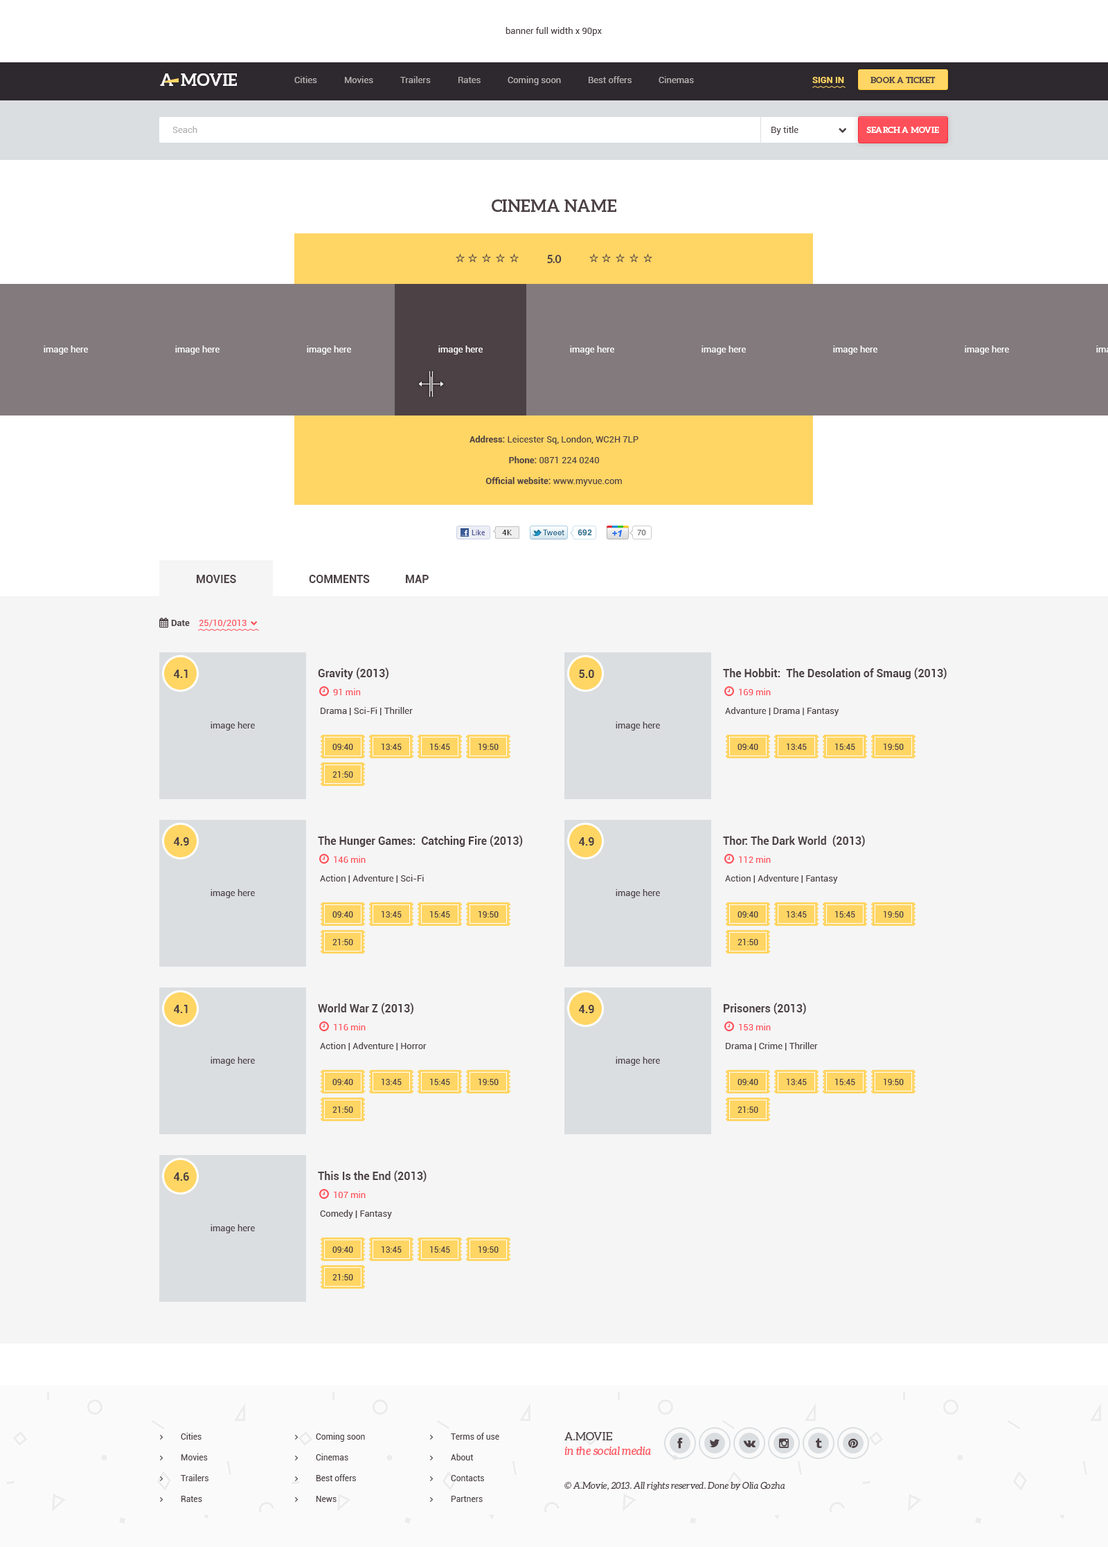
<style>
.page{position:relative;width:1108px;height:1547px;background:#f5f5f5}
.page>*{position:absolute;margin:0}
.t1{font:9px "Roboto-Regular";color:#4c4145}
.t2{font:16.6px "Aleo-Bold";color:#ffffff;text-transform:uppercase}
.t3{font:9px "Roboto-Regular";color:#b4b1b2}
.t4{font:9px "Roboto-Bold";color:#ffd564;text-transform:uppercase}
.t5{font:8.3px "Aleo-Bold";color:#4c4145;text-transform:uppercase}
.t6{font:8.3px "Aleo-Bold";color:#ffffff;text-transform:uppercase}
.t7{font:16.6px "Aleo-Bold";color:#4c4145;text-transform:uppercase}
.t8{font:11.1px "Aleo-Bold";color:#4c4145;text-transform:uppercase}
.t9{font:9px "Roboto-Regular";color:#ffffff}
.t10{font:9px "Roboto-Bold";color:#4c4145}
.t11{font:6.9px "LucidaGrande";letter-spacing:0.01em;color:#535998}
.t12{font:7.6px "LucidaGrande";color:#000000}
.t13{font:8px "HelveticaNeue-Medium";color:#186487}
.t14{font:8.3px "Helvetica-Bold";letter-spacing:0.015em;color:#2a7090}
.t15{font:9.7px "Arial-BoldItalicMT";color:#166aee}
.t16{font:7.6px "Helvetica";letter-spacing:0.015em;color:#666666}
.t17{font:11.1px "Roboto-Bold";color:#4c4145;text-transform:uppercase}
.t18{font:9px "Roboto-Regular";color:#fe505a}
.t19{font:11.1px "Roboto-Bold";color:#4c4145}
.t20{font:8.3px "Roboto-Regular";color:#4c4145}
.t21{font:11.1px/14.5px "Aleo-Italic";color:#fe505a}
.t22{font:11.1px/14.5px "Aleo-Regular";color:#4c4145;text-transform:uppercase}
.t23{font:9px "Aleo-Italic";color:#4c4145}
</style>
<div class="page">
<p class="t1" style="left:505px;top:27px;width:97px;height:9px">banner full width x 90px</p>
<p class="t2" style="left:160px;top:73px;width:13px;height:13px">A</p>
<p class="t2" style="left:181px;top:73px;width:56px;height:13px">movie</p>
<p class="t3" style="left:294px;top:76px;width:23px;height:7px">Cities</p>
<p class="t3" style="left:345px;top:76px;width:28px;height:7px">Movies</p>
<p class="t3" style="left:400px;top:76px;width:31px;height:7px">Trailers</p>
<p class="t3" style="left:458px;top:77px;width:22px;height:6px">Rates</p>
<p class="t3" style="left:507px;top:76px;width:54px;height:9px">Coming soon</p>
<p class="t3" style="left:588px;top:76px;width:43px;height:7px">Best offers</p>
<p class="t3" style="left:658px;top:76px;width:36px;height:7px">Cinemas</p>
<p class="t4" style="left:812px;top:77px;width:32px;height:6px">Sign in</p>
<p class="t5" style="left:870px;top:77px;width:65px;height:6px">Book a ticket</p>
<p class="t3" style="left:172px;top:126px;width:25px;height:7px">Seach</p>
<p class="t1" style="left:771px;top:126px;width:27px;height:9px">By title</p>
<p class="t6" style="left:866px;top:127px;width:73px;height:6px">search a movie</p>
<p class="t7" style="left:492px;top:199px;width:124px;height:13px">Cinema name</p>
<p class="t8" style="left:547px;top:255px;width:14px;height:9px">5.0</p>
<p class="t9" style="left:44px;top:345px;width:44px;height:9px">image here</p>
<p class="t9" style="left:175px;top:345px;width:44px;height:9px">image here</p>
<p class="t9" style="left:307px;top:345px;width:44px;height:9px">image here</p>
<p class="t9" style="left:438px;top:345px;width:45px;height:9px">image here</p>
<p class="t9" style="left:570px;top:345px;width:44px;height:9px">image here</p>
<p class="t9" style="left:701px;top:345px;width:45px;height:9px">image here</p>
<p class="t9" style="left:833px;top:345px;width:44px;height:9px">image here</p>
<p class="t9" style="left:964px;top:345px;width:45px;height:9px">image here</p>
<p class="t1" style="left:469px;top:435px;width:169px;height:9px"><span class="t10">Address:</span> Leicester Sq, London, WC2H 7LP</p>
<p class="t1" style="left:509px;top:456px;width:90px;height:7px"><span class="t10">Phone: </span>0871 224 0240</p>
<p class="t10" style="left:485px;top:477px;width:137px;height:9px">Official website:<span class="t1"> www.myvue.com</span></p>
<p class="t11" style="left:471px;top:530px;width:14px;height:5px">Like</p>
<p class="t12" style="left:502px;top:530px;width:10px;height:5px">4K</p>
<p class="t13" style="left:543px;top:529px;width:21px;height:6px">Tweet</p>
<p class="t14" style="left:577px;top:529px;width:15px;height:7px">692</p>
<p class="t15" style="left:612px;top:530px;width:5px;height:6px">+</p>
<p class="t15" style="left:618px;top:530px;width:4px;height:7px">1</p>
<p class="t16" style="left:637px;top:530px;width:9px;height:5px">70</p>
<p class="t17" style="left:197px;top:575px;width:39px;height:8px">Movies</p>
<p class="t17" style="left:309px;top:575px;width:61px;height:8px">Comments</p>
<p class="t17" style="left:406px;top:575px;width:23px;height:8px">Map</p>
<p class="t10" style="left:171px;top:620px;width:19px;height:6px">Date</p>
<p class="t18" style="left:199px;top:619px;width:47px;height:8px">25/10/2013</p>
<p class="t19" style="left:174px;top:669px;width:14px;height:9px">4.1</p>
<p class="t19" style="left:318px;top:667px;width:70px;height:12px">Gravity (2013)</p>
<p class="t19" style="left:579px;top:669px;width:15px;height:9px">5.0</p>
<p class="t19" style="left:723px;top:667px;width:223px;height:12px">The Hobbit:  The Desolation of Smaug (2013)</p>
<p class="t18" style="left:333px;top:688px;width:28px;height:7px">91 min</p>
<p class="t18" style="left:739px;top:688px;width:32px;height:7px">169 min</p>
<p class="t1" style="left:321px;top:707px;width:92px;height:8px">Drama | Sci-Fi | Thriller</p>
<p class="t1" style="left:725px;top:707px;width:114px;height:9px">Advanture | Drama | Fantasy</p>
<p class="t1" style="left:210px;top:721px;width:45px;height:9px">image here</p>
<p class="t1" style="left:615px;top:721px;width:45px;height:9px">image here</p>
<p class="t20" style="left:332px;top:744px;width:21px;height:6px">09:40</p>
<p class="t20" style="left:381px;top:743px;width:21px;height:7px">13:45</p>
<p class="t20" style="left:430px;top:743px;width:20px;height:7px">15:45</p>
<p class="t20" style="left:478px;top:743px;width:20px;height:7px">19:50</p>
<p class="t20" style="left:737px;top:744px;width:21px;height:6px">09:40</p>
<p class="t20" style="left:786px;top:743px;width:21px;height:7px">13:45</p>
<p class="t20" style="left:835px;top:743px;width:20px;height:7px">15:45</p>
<p class="t20" style="left:883px;top:743px;width:20px;height:7px">19:50</p>
<p class="t20" style="left:332px;top:771px;width:21px;height:6px">21:50</p>
<p class="t19" style="left:174px;top:837px;width:15px;height:8px">4.9</p>
<p class="t19" style="left:318px;top:835px;width:205px;height:12px">The Hunger Games:  Catching Fire (2013)</p>
<p class="t19" style="left:579px;top:837px;width:15px;height:8px">4.9</p>
<p class="t19" style="left:723px;top:835px;width:142px;height:12px">Thor: The Dark World  (2013)</p>
<p class="t18" style="left:334px;top:856px;width:32px;height:7px">146 min</p>
<p class="t18" style="left:739px;top:856px;width:32px;height:7px">112 min</p>
<p class="t1" style="left:320px;top:874px;width:104px;height:9px">Action | Adventure | Sci-Fi</p>
<p class="t1" style="left:725px;top:874px;width:113px;height:9px">Action | Adventure | Fantasy</p>
<p class="t1" style="left:210px;top:889px;width:45px;height:9px">image here</p>
<p class="t1" style="left:615px;top:889px;width:45px;height:9px">image here</p>
<p class="t20" style="left:332px;top:911px;width:21px;height:6px">09:40</p>
<p class="t20" style="left:381px;top:910px;width:21px;height:7px">13:45</p>
<p class="t20" style="left:430px;top:910px;width:20px;height:7px">15:45</p>
<p class="t20" style="left:478px;top:910px;width:20px;height:7px">19:50</p>
<p class="t20" style="left:737px;top:911px;width:21px;height:6px">09:40</p>
<p class="t20" style="left:786px;top:910px;width:21px;height:7px">13:45</p>
<p class="t20" style="left:835px;top:910px;width:20px;height:7px">15:45</p>
<p class="t20" style="left:883px;top:910px;width:20px;height:7px">19:50</p>
<p class="t20" style="left:332px;top:938px;width:21px;height:7px">21:50</p>
<p class="t20" style="left:737px;top:938px;width:21px;height:7px">21:50</p>
<p class="t19" style="left:174px;top:1005px;width:14px;height:8px">4.1</p>
<p class="t19" style="left:318px;top:1002px;width:95px;height:12px">World War Z (2013)</p>
<p class="t19" style="left:579px;top:1005px;width:15px;height:8px">4.9</p>
<p class="t19" style="left:723px;top:1002px;width:83px;height:12px">Prisoners (2013)</p>
<p class="t18" style="left:334px;top:1023px;width:32px;height:7px">116 min</p>
<p class="t18" style="left:739px;top:1023px;width:32px;height:7px">153 min</p>
<p class="t1" style="left:320px;top:1042px;width:106px;height:8px">Action | Adventure | Horror</p>
<p class="t1" style="left:726px;top:1042px;width:92px;height:8px">Drama | Crime | Thriller</p>
<p class="t1" style="left:210px;top:1056px;width:45px;height:9px">image here</p>
<p class="t1" style="left:615px;top:1056px;width:45px;height:9px">image here</p>
<p class="t20" style="left:332px;top:1079px;width:21px;height:6px">09:40</p>
<p class="t20" style="left:381px;top:1078px;width:21px;height:7px">13:45</p>
<p class="t20" style="left:430px;top:1078px;width:20px;height:7px">15:45</p>
<p class="t20" style="left:478px;top:1078px;width:20px;height:7px">19:50</p>
<p class="t20" style="left:737px;top:1079px;width:21px;height:6px">09:40</p>
<p class="t20" style="left:786px;top:1078px;width:21px;height:7px">13:45</p>
<p class="t20" style="left:835px;top:1078px;width:20px;height:7px">15:45</p>
<p class="t20" style="left:883px;top:1078px;width:20px;height:7px">19:50</p>
<p class="t20" style="left:332px;top:1106px;width:21px;height:7px">21:50</p>
<p class="t20" style="left:737px;top:1106px;width:21px;height:7px">21:50</p>
<p class="t19" style="left:174px;top:1172px;width:15px;height:8px">4.6</p>
<p class="t19" style="left:318px;top:1170px;width:108px;height:12px">This Is the End (2013)</p>
<p class="t18" style="left:334px;top:1191px;width:32px;height:7px">107 min</p>
<p class="t1" style="left:320px;top:1209px;width:72px;height:9px">Comedy | Fantasy</p>
<p class="t1" style="left:210px;top:1224px;width:45px;height:9px">image here</p>
<p class="t20" style="left:332px;top:1246px;width:21px;height:6px">09:40</p>
<p class="t20" style="left:381px;top:1245px;width:21px;height:7px">13:45</p>
<p class="t20" style="left:430px;top:1245px;width:20px;height:7px">15:45</p>
<p class="t20" style="left:478px;top:1245px;width:20px;height:7px">19:50</p>
<p class="t20" style="left:332px;top:1273px;width:21px;height:7px">21:50</p>
<p class="t20" style="left:181px;top:1432px;width:20px;height:7px">Cities</p>
<p class="t20" style="left:316px;top:1432px;width:49px;height:9px">Coming soon</p>
<p class="t20" style="left:451px;top:1432px;width:48px;height:7px">Terms of use</p>
<p class="t21" style="left:564px;top:1432px;width:87px;height:23px"><span class="t22">A.Movie <br></span>in the social media</p>
<p class="t20" style="left:181px;top:1453px;width:27px;height:7px">Movies</p>
<p class="t20" style="left:316px;top:1453px;width:32px;height:7px">Cinemas</p>
<p class="t20" style="left:451px;top:1453px;width:23px;height:7px">About</p>
<p class="t20" style="left:181px;top:1474px;width:27px;height:7px">Trailers</p>
<p class="t20" style="left:316px;top:1474px;width:40px;height:7px">Best offers</p>
<p class="t20" style="left:451px;top:1475px;width:33px;height:6px">Contacts</p>
<p class="t23" style="left:564px;top:1482px;width:221px;height:8px">© A.Movie, 2013. All rights reserved. Done by Olia Gozha</p>
<p class="t20" style="left:181px;top:1495px;width:21px;height:7px">Rates</p>
<p class="t20" style="left:316px;top:1495px;width:20px;height:7px">News</p>
<p class="t20" style="left:451px;top:1495px;width:32px;height:7px">Partners</p>
</div>
